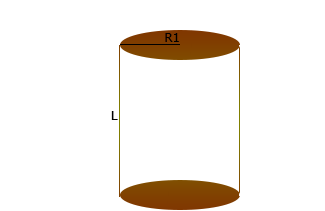
<style>
.page{position:relative;width:325px;height:211px;background:#ffffff}
.page>*{position:absolute;margin:0}
.t1{font:13.3px "Tahoma";color:#000000}
</style>
<div class="page">
<p class="t1" style="left:165px;top:33px;width:14px;height:9px">R1</p>
<p class="t1" style="left:111px;top:111px;width:7px;height:9px">L</p>
</div>
